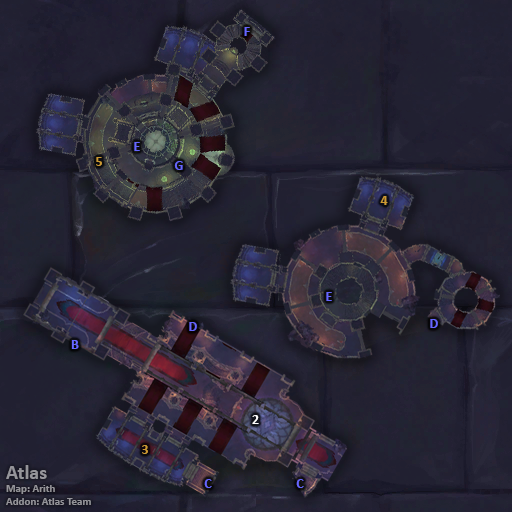
<style>
.page{position:relative;width:512px;height:512px}
.page>*{position:absolute;margin:0}
.t1{font:14px "Calibri-Bold";color:#6666ff}
.t2{font:14px "Calibri-Bold";color:#cc9933}
.t3{font:14px "Calibri-Bold";color:#ffffff}
.t4{font:11px "Calibri-Bold";color:#949499}
.t5{font:20px "Calibri-Bold";color:#949499}
</style>
<div class="page">
<p class="t1" style="left:244px;top:27px;width:6px;height:9px">F</p>
<p class="t1" style="left:134px;top:142px;width:6px;height:9px">E</p>
<p class="t2" style="left:96px;top:157px;width:6px;height:9px">5</p>
<p class="t1" style="left:174px;top:161px;width:9px;height:9px">G</p>
<p class="t2" style="left:380px;top:196px;width:8px;height:9px">4</p>
<p class="t1" style="left:326px;top:292px;width:6px;height:9px">E</p>
<p class="t1" style="left:189px;top:322px;width:8px;height:9px">D</p>
<p class="t1" style="left:430px;top:319px;width:8px;height:9px">D</p>
<p class="t1" style="left:71px;top:340px;width:8px;height:9px">B</p>
<p class="t3" style="left:252px;top:415px;width:7px;height:9px">2</p>
<p class="t2" style="left:142px;top:445px;width:6px;height:9px">3</p>
<p class="t4" style="left:6px;top:465px;width:85px;height:40px"><span class="t5">Atlas<br></span>Map: Arith<br>Addon: Atlas Team</p>
<p class="t1" style="left:204px;top:479px;width:8px;height:9px">C</p>
<p class="t1" style="left:296px;top:479px;width:8px;height:9px">C</p>
</div>
